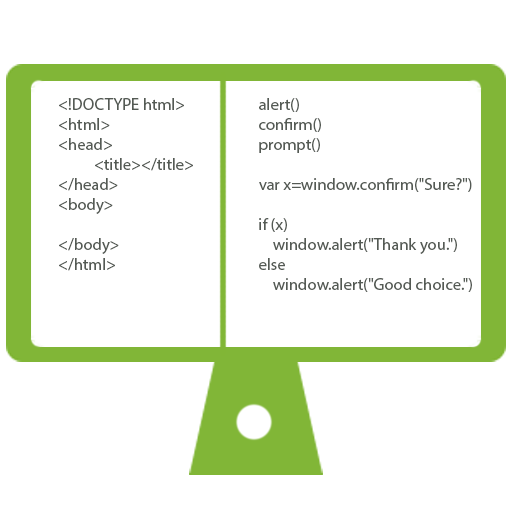
<style>
.page{position:relative;width:512px;height:512px;background:#ffffff}
.page>*{position:absolute;margin:0}
.t1{font:16.7px "MyriadPro-Regular";color:#545a54}
</style>
<div class="page">
<p class="t1" style="left:59px;top:98px;width:134px;height:173px">&lt;!DOCTYPE html&gt;<br>&lt;html&gt;<br>&lt;head&gt;<br> &lt;title&gt;&lt;/title&gt;<br>&lt;/head&gt;<br>&lt;body&gt;<br><br>&lt;/body&gt;<br>&lt;/html&gt;</p>
<p class="t1" style="left:259px;top:98px;width:213px;height:194px">alert()<br>confirm()<br>prompt()<br><br>var x=window.confirm("Sure?")<br><br>if (x)<br>    window.alert("Thank you.")<br>else<br>    window.alert("Good choice.")</p>
</div>
